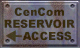
<style>
.page{position:relative;width:80px;height:48px}
.page>*{position:absolute;margin:0}
.t1{font:11px/12px "Arial-Black";color:#3e330c}
.t2{font:11px "Arial-Black";color:#3e330c}
</style>
<div class="page">
<p class="t1" style="left:4px;top:7px;width:71px;height:21px;text-align:center">CenCom<br> RESERVOIR</p>
<p class="t2" style="left:22px;top:31px;width:50px;height:10px">ACCESS</p>
</div>
